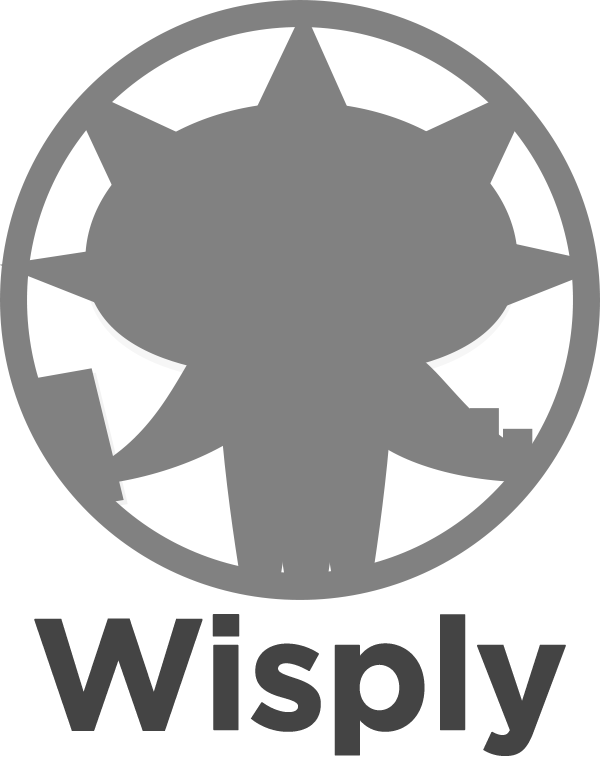
<style>
.page{position:relative;width:600px;height:766px;background:#ffffff}
.page>*{position:absolute;margin:0}
.t1{font:157.4px "Gotham-Bold";letter-spacing:-0.04em;color:#444444;font-weight:bold}
</style>
<div class="page">
<p class="t1" style="left:34px;top:614px;width:532px;height:142px">Wisply</p>
</div>
